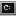
<style>
.page{position:relative;width:16px;height:16px}
.page>*{position:absolute;margin:0}
.t1{font:8px "Courier";letter-spacing:-0.125em}
.t2{font:6px "Courier";letter-spacing:-0.2em}
</style>
<div class="page">
<p class="t1" style="left:4px;top:5px;width:6px;height:5px">C<span class="t2">:</span></p>
</div>
